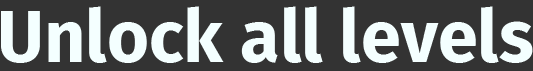
<style>
.page{position:relative;width:533px;height:71px;background:#333333}
.page>*{position:absolute;margin:0}
.t1{font:72px "FiraSans-Bold";color:#f4ffff}
</style>
<div class="page">
<p class="t1" style="left:1px;top:6px;width:532px;height:57px">Unlock all levels</p>
</div>
